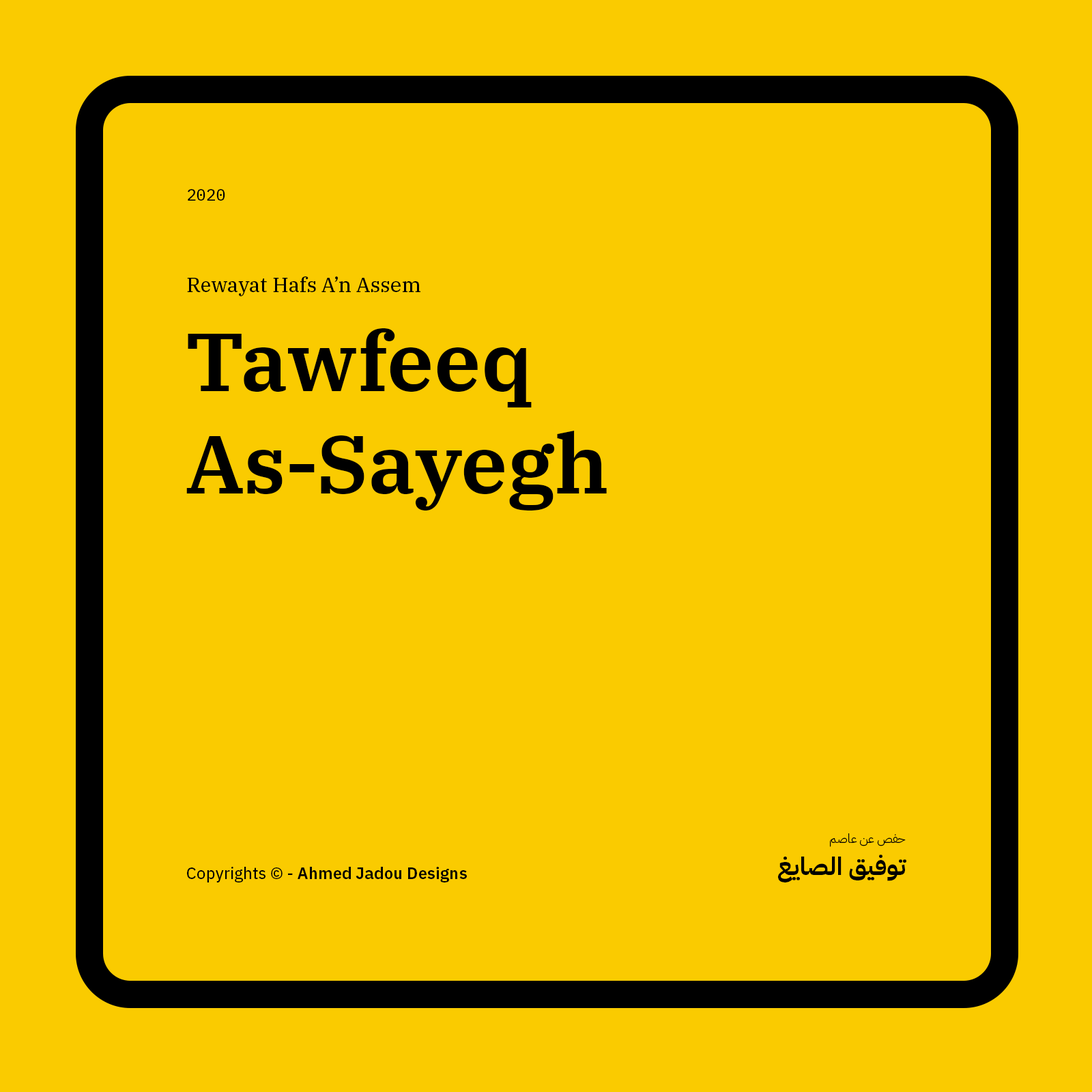
<style>
.page{position:relative;width:1092px;height:1092px;background:#facb00}
.page>*{position:absolute;margin:0}
.t1{font:16.4px "IBMPlexMono-Text";color:#000000}
.t2{font:20.5px "IBMPlexSerif-Text";color:#000000}
.t3{font:81.9px/102.7px "IBMPlexSerif-SemiBold";color:#000000}
.t4{font:12.3px "IBMPlexArabic-Light";color:#000000}
.t5{font:24.6px "IBMPlexArabic-Bold";color:#000000}
.t6{font:16.4px "IBMPlexSans-SemiBold";color:#000000}
.t7{font:16.4px "IBMPlexSans-Text";color:#000000}
</style>
<div class="page">
<p class="t1" style="left:188px;top:189px;width:37px;height:12px">2020</p>
<p class="t2" style="left:187px;top:276px;width:233px;height:20px">Rewayat Hafs A’n Assem</p>
<p class="t3" style="left:186px;top:328px;width:421px;height:183px">Tawfeeq As-Sayegh</p>
<p class="t4" style="left:830px;top:833px;width:76px;height:14px">حفص عن عاصم</p>
<p class="t5" style="left:778px;top:854px;width:128px;height:28px">توفيق الصايغ</p>
<p class="t6" style="left:187px;top:867px;width:280px;height:15px"><span class="t7">Copyrights © - </span>Ahmed Jadou Designs</p>
</div>
